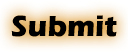
<style>
.page{position:relative;width:128px;height:53px}
.page>*{position:absolute;margin:0}
.t1{font:30px "ErasITC-Bold";color:#000000}
</style>
<div class="page">
<p class="t1" style="left:11px;top:15px;width:106px;height:22px">Submit</p>
</div>
